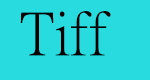
<style>
.page{position:relative;width:150px;height:80px;background:#28dbde}
.page>*{position:absolute;margin:0}
.t1{font:60px "PMingLiU-ExtB";color:#000000}
</style>
<div class="page">
<p class="t1" style="left:20px;top:11px;width:91px;height:45px">Tiff</p>
</div>
